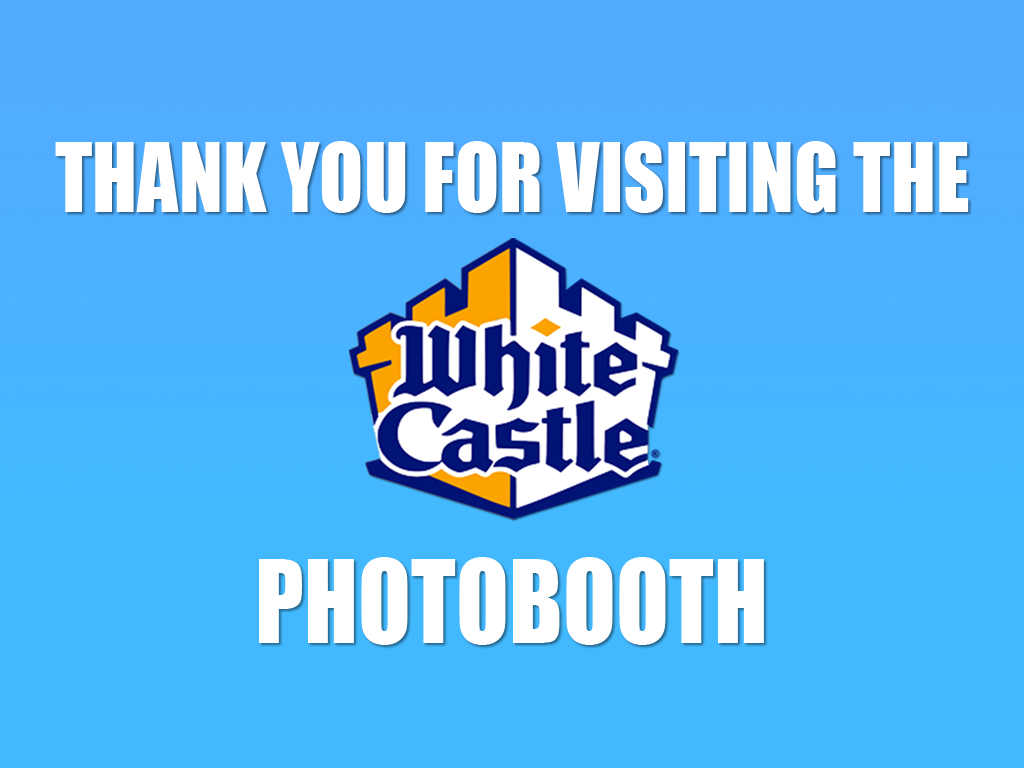
<style>
.page{position:relative;width:1024px;height:768px;background:#42b9ff}
.page>*{position:absolute;margin:0}
.t1{font:88.9px "Impact";color:#ffffff;scale:0.91 1}
.t2{font:106.3px "Impact";color:#ffffff;scale:0.91 1}
</style>
<div class="page">
<p class="t1" style="left:55px;top:141px;width:914px;height:72px">THANK YOU FOR VISITING THE</p>
<p class="t2" style="left:259px;top:557px;width:505px;height:88px">PHOTOBOOTH</p>
</div>
